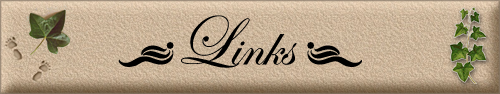
<style>
.page{position:relative;width:500px;height:94px}
.page>*{position:absolute;margin:0}
.t1{font:60px "EdwardianScriptITC";color:#000000}
.t2{font:72px "EdwardianScriptITC";color:#000000}
.t3{font:30px "AbsinthFlourishesII";color:#000000}
</style>
<div class="page">
<p class="t1" style="left:118px;top:15px;width:244px;height:53px"><span class="t2">     </span><span class="t3">O</span><span class="t2">L</span>inks <span class="t3">N</span></p>
</div>
